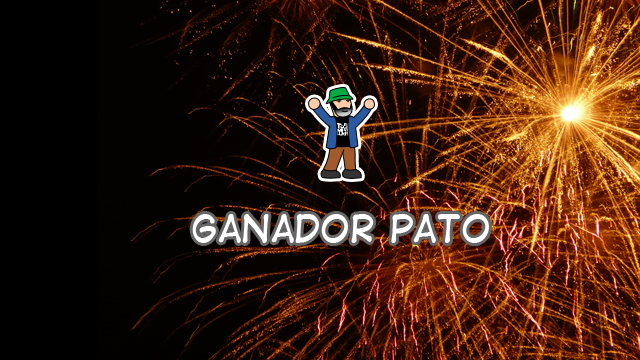
<style>
.page{position:relative;width:640px;height:360px}
.page>*{position:absolute;margin:0}
.t1{font:36px "DigitalStrip";color:#ffffff}
</style>
<div class="page">
<p class="t1" style="left:192px;top:214px;width:297px;height:29px">Ganador Pato</p>
</div>
